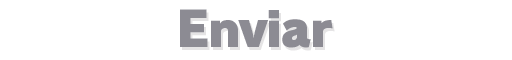
<style>
.page{position:relative;width:512px;height:60px;background:#ffffff}
.page>*{position:absolute;margin:0}
.t1{font:48px "RodinPro-UB";letter-spacing:-0.03em;color:#8c8b93}
</style>
<div class="page">
<p class="t1" style="left:180px;top:9px;width:153px;height:39px">Enviar</p>
</div>
